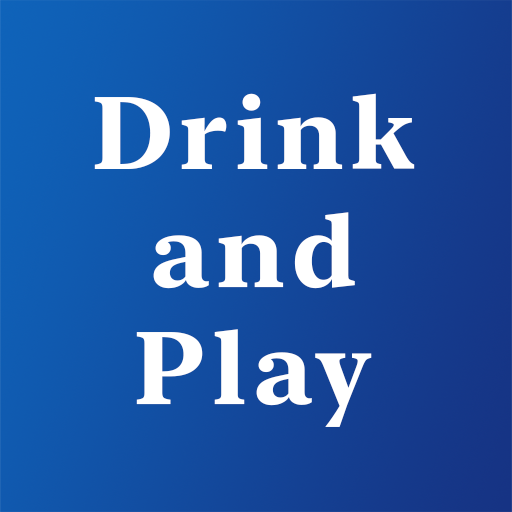
<style>
.page{position:relative;width:512px;height:512px}
.page>*{position:absolute;margin:0}
.t1{font:101.7px/117.7px "NewYorkMedium-Bold";letter-spacing:0.06em;color:#ffffff}
</style>
<div class="page">
<p class="t1" style="left:94px;top:93px;width:321px;height:334px;text-align:center">Drink<br>and<br>Play</p>
</div>
